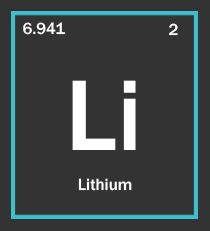
<style>
.page{position:relative;width:210px;height:231px;background:#333333}
.page>*{position:absolute;margin:0}
.t1{font:16.8px "FranklinGothic-Medium";color:#ffffff}
.t2{font:104.2px "FranklinGothic-Medium";color:#ffffff}
</style>
<div class="page">
<p class="t1" style="left:23px;top:22px;width:43px;height:13px">6.941</p>
<p class="t1" style="left:169px;top:23px;width:9px;height:13px">2</p>
<p class="t2" style="left:72px;top:80px;width:64px;height:70px">Li</p>
<p class="t1" style="left:78px;top:178px;width:54px;height:13px">Lithium</p>
</div>
